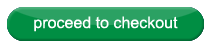
<style>
.page{position:relative;width:211px;height:49px;background:#ffffff}
.page>*{position:absolute;margin:0}
.t1{font:16px "ArialMT";color:#ffffff}
</style>
<div class="page">
<p class="t1" style="left:34px;top:16px;width:144px;height:16px">proceed to checkout</p>
</div>
